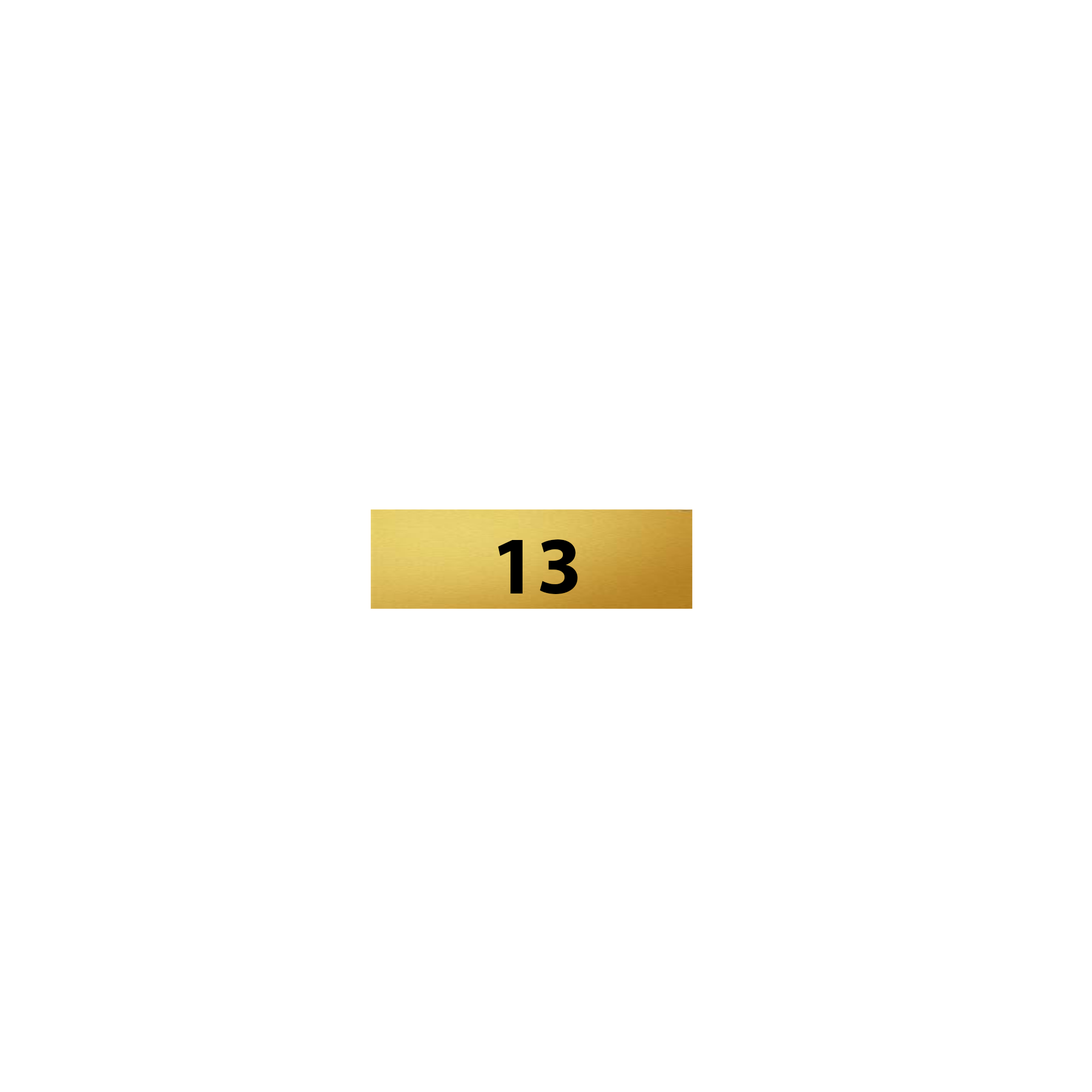
<style>
.page{position:relative;width:1092px;height:1092px;background:#ffffff}
.page>*{position:absolute;margin:0}
.t1{font:81.9px "MyriadPro-Bold";color:#000000}
</style>
<div class="page">
<p class="t1" style="left:498px;top:539px;width:80px;height:55px">13</p>
</div>
